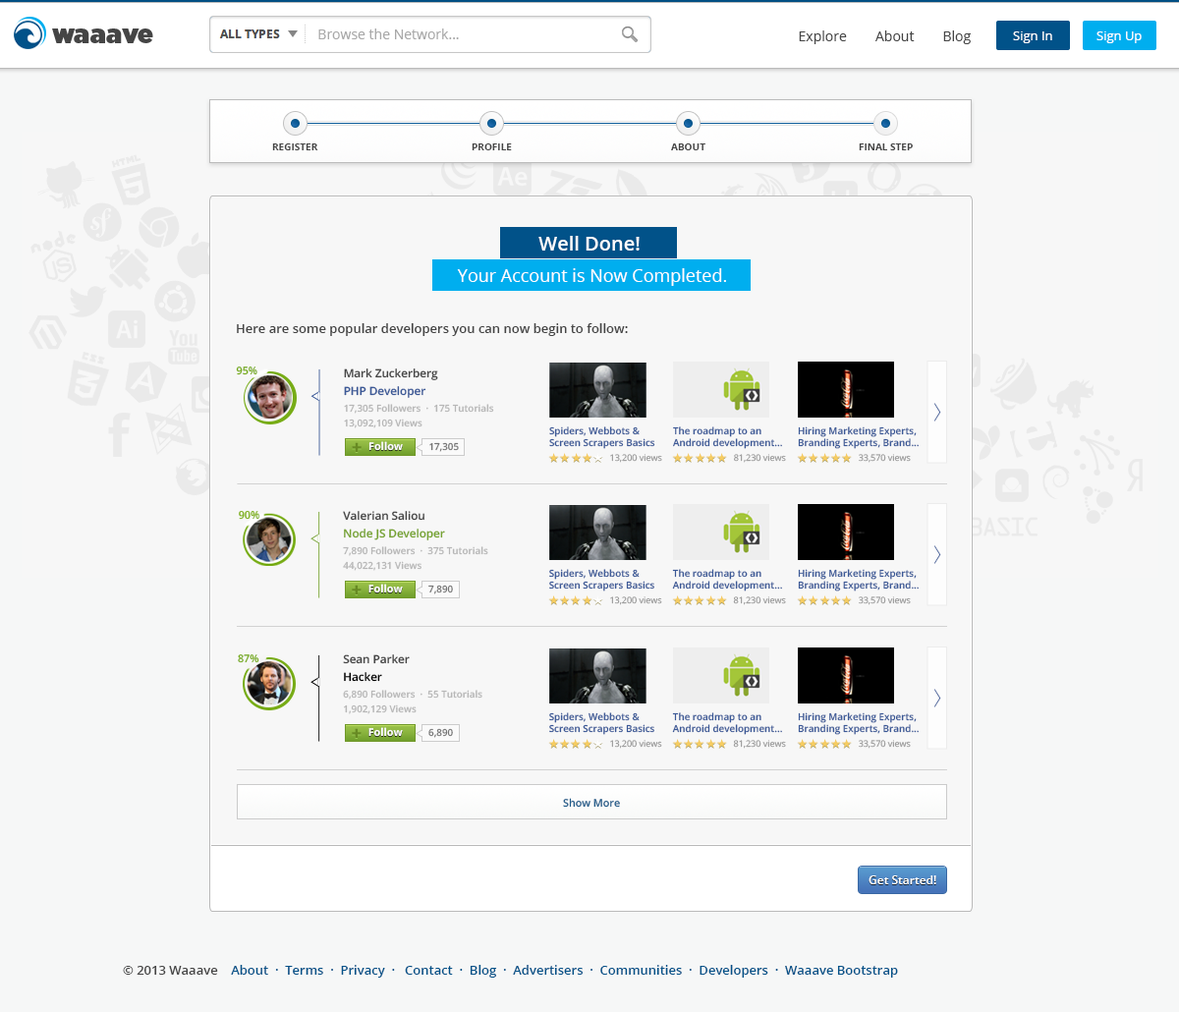
<style>
.page{position:relative;width:1179px;height:1012px;background:#f7f7f7}
.page>*{position:absolute;margin:0}
.t1{font:13.8px "OpenSans";color:#a9a9a9}
.t2{font:13.8px "OpenSans";color:#454545}
.t3{font:12.8px "OpenSans";color:#ffffff}
.t4{font:9.8px "OpenSans-Bold";color:#454545}
.t5{font:19.6px "OpenSans-Semibold";color:#fefefe}
.t6{font:17.7px "OpenSans";color:#fefefe}
.t7{font:12.8px "OpenSans-Semibold";color:#454545}
.t8{font:10.5px "OpenSans-Semibold";color:#77ac16}
.t9{font:11.4px "OpenSans-Semibold";color:#454545}
.t10{font:11.4px "OpenSans-Semibold";color:#3b5997}
.t11{font:9.7px "OpenSans-Semibold";color:#b7b7b7}
.t12{font:20.2px "AppleGothic";color:#3b5997}
.t13{font:9.7px "OpenSans-Semibold";color:#3b5997}
.t14{font:18.4px "OpenSans-Extrabold";color:#678a23}
.t15{font:10.5px "OpenSans-Bold";color:#ffffff}
.t16{font:9.7px "OpenSans-Semibold";color:#777777}
.t17{font:14px "ModernPictograms";color:#f6cc60}
.t18{font:14px "ModernPictograms";color:#ffffff}
.t19{font:8.8px "OpenSans";color:#999999}
.t20{font:11.4px "OpenSans-Semibold";color:#76a32f}
.t21{font:11.4px "OpenSans-Semibold";color:#000000}
.t22{font:10.6px "OpenSans-Semibold";color:#205d8b}
.t23{font:11.8px "OpenSans-Semibold";color:#ffffff}
.t24{font:12.8px "OpenSans-Semibold";color:#015289}
</style>
<div class="page">
<p class="t1" style="left:318px;top:28px;width:141px;height:11px">Browse the Network...</p>
<p class="t2" style="left:799px;top:30px;width:171px;height:14px">Explore        About        Blog</p>
<p class="t3" style="left:1013px;top:31px;width:39px;height:12px">Sign In</p>
<p class="t3" style="left:1096px;top:31px;width:45px;height:12px">Sign Up</p>
<p class="t4" style="left:272px;top:143px;width:46px;height:7px">REGISTER</p>
<p class="t4" style="left:471px;top:143px;width:41px;height:7px">PROFILE</p>
<p class="t4" style="left:671px;top:143px;width:34px;height:7px">ABOUT</p>
<p class="t4" style="left:858px;top:143px;width:54px;height:7px">FINAL STEP</p>
<p class="t5" style="left:538px;top:236px;width:101px;height:14px">Well Done!</p>
<p class="t6" style="left:457px;top:268px;width:269px;height:18px">Your Account is Now Completed.</p>
<p class="t7" style="left:237px;top:323px;width:391px;height:13px">Here are some popular developers you can now begin to follow:</p>
<p class="t8" style="left:236px;top:366px;width:21px;height:9px">95%</p>
<p class="t9" style="left:344px;top:368px;width:94px;height:12px">Mark Zuckerberg</p>
<p class="t10" style="left:344px;top:386px;width:82px;height:12px">PHP Developer</p>
<p class="t11" style="left:344px;top:404px;width:150px;height:10px">17,305 Followers  ·  175 Tutorials</p>
<p class="t12" style="left:933px;top:403px;width:8px;height:18px">&gt;</p>
<p class="t11" style="left:344px;top:418px;width:78px;height:10px">13,092,109 Views</p>
<p class="t13" style="left:549px;top:426px;width:106px;height:23px">Spiders, Webbots &amp; <br>Screen Scrapers Basics</p>
<p class="t13" style="left:673px;top:426px;width:109px;height:23px">The roadmap to an<br>Android development...</p>
<p class="t13" style="left:798px;top:426px;width:120px;height:23px">Hiring Marketing Experts,<br>Branding Experts, Brand...</p>
<p class="t14" style="left:352px;top:442px;width:9px;height:10px">+</p>
<p class="t15" style="left:368px;top:441px;width:35px;height:10px">Follow</p>
<p class="t16" style="left:429px;top:442px;width:30px;height:10px">17,305</p>
<p class="t17" style="left:548px;top:453px;width:55px;height:9px">****<span class="t18">*</span></p>
<p class="t19" style="left:610px;top:454px;width:52px;height:9px">13,200 views</p>
<p class="t17" style="left:672px;top:453px;width:55px;height:9px">*****</p>
<p class="t19" style="left:734px;top:454px;width:52px;height:9px">81,230 views</p>
<p class="t17" style="left:797px;top:453px;width:55px;height:9px">*****</p>
<p class="t19" style="left:858px;top:454px;width:53px;height:9px">33,570 views</p>
<p class="t9" style="left:343px;top:511px;width:81px;height:10px">Valerian Saliou</p>
<p class="t20" style="left:344px;top:528px;width:101px;height:12px">Node JS Developer</p>
<p class="t12" style="left:933px;top:545px;width:8px;height:19px">&gt;</p>
<p class="t11" style="left:343px;top:546px;width:145px;height:10px">7,890 Followers  ·  375 Tutorials</p>
<p class="t11" style="left:343px;top:561px;width:78px;height:10px">44,022,131 Views</p>
<p class="t13" style="left:549px;top:569px;width:105px;height:22px">Spiders, Webbots &amp; <br>Screen Scrapers Basics</p>
<p class="t13" style="left:672px;top:569px;width:110px;height:22px">The roadmap to an<br>Android development...</p>
<p class="t13" style="left:798px;top:569px;width:120px;height:22px">Hiring Marketing Experts,<br>Branding Experts, Brand...</p>
<p class="t14" style="left:352px;top:584px;width:9px;height:10px">+</p>
<p class="t15" style="left:368px;top:583px;width:35px;height:10px">Follow</p>
<p class="t16" style="left:428px;top:584px;width:25px;height:10px">7,890</p>
<p class="t17" style="left:548px;top:595px;width:55px;height:9px">****<span class="t18">*</span></p>
<p class="t19" style="left:610px;top:596px;width:52px;height:9px">13,200 views</p>
<p class="t17" style="left:672px;top:595px;width:55px;height:9px">*****</p>
<p class="t19" style="left:733px;top:596px;width:53px;height:9px">81,230 views</p>
<p class="t17" style="left:797px;top:595px;width:55px;height:9px">*****</p>
<p class="t19" style="left:858px;top:596px;width:53px;height:9px">33,570 views</p>
<p class="t8" style="left:238px;top:654px;width:21px;height:9px">87%</p>
<p class="t9" style="left:343px;top:654px;width:67px;height:10px">Sean Parker</p>
<p class="t21" style="left:344px;top:672px;width:38px;height:10px">Hacker</p>
<p class="t11" style="left:343px;top:690px;width:139px;height:9px">6,890 Followers  ·  55 Tutorials</p>
<p class="t12" style="left:933px;top:689px;width:8px;height:18px">&gt;</p>
<p class="t11" style="left:344px;top:704px;width:72px;height:10px">1,902,129 Views</p>
<p class="t13" style="left:549px;top:712px;width:105px;height:23px">Spiders, Webbots &amp; <br>Screen Scrapers Basics</p>
<p class="t13" style="left:672px;top:712px;width:110px;height:23px">The roadmap to an<br>Android development...</p>
<p class="t13" style="left:798px;top:712px;width:120px;height:23px">Hiring Marketing Experts,<br>Branding Experts, Brand...</p>
<p class="t14" style="left:352px;top:728px;width:9px;height:10px">+</p>
<p class="t15" style="left:368px;top:727px;width:35px;height:10px">Follow</p>
<p class="t16" style="left:428px;top:728px;width:25px;height:10px">6,890</p>
<p class="t17" style="left:548px;top:739px;width:55px;height:8px">****<span class="t18">*</span></p>
<p class="t19" style="left:610px;top:740px;width:52px;height:8px">13,200 views</p>
<p class="t17" style="left:672px;top:739px;width:55px;height:8px">*****</p>
<p class="t19" style="left:733px;top:740px;width:53px;height:8px">81,230 views</p>
<p class="t17" style="left:797px;top:739px;width:55px;height:8px">*****</p>
<p class="t19" style="left:858px;top:740px;width:53px;height:8px">33,570 views</p>
<p class="t22" style="left:563px;top:798px;width:57px;height:9px">Show More</p>
<p class="t23" style="left:868px;top:875px;width:68px;height:9px">Get Started!</p>
<p class="t24" style="left:123px;top:965px;width:775px;height:12px"><span class="t7">© 2013 Waaave</span>    About  ·  Terms  ·  Privacy  ·   Contact  ·  Blog  ·  Advertisers  ·  Communities  ·  Developers  ·  Waaave Bootstrap</p>
</div>
